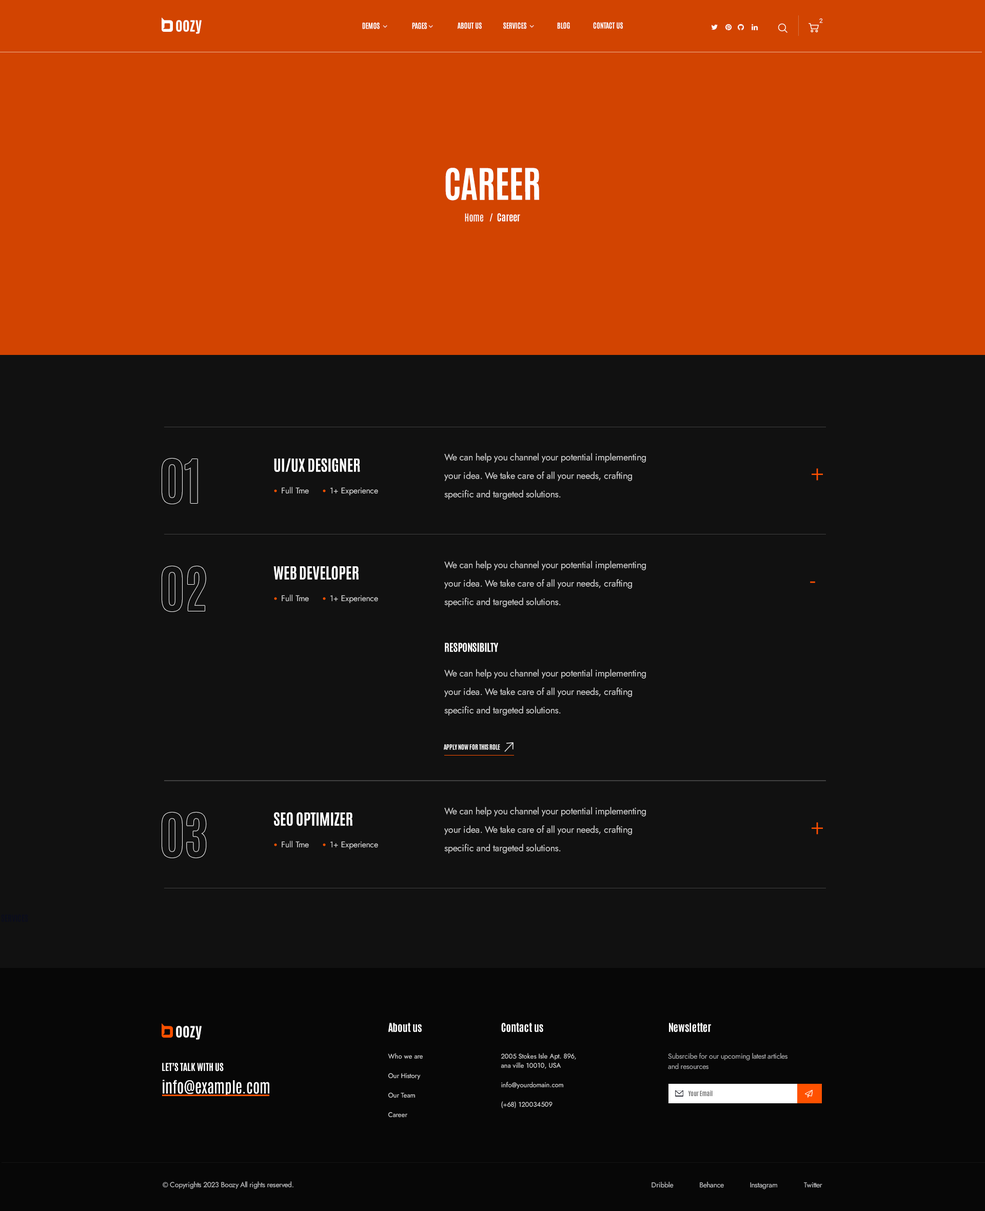
<style>
.page{position:relative;width:985px;height:1211px;background:#111111}
.page>*{position:absolute;margin:0}
.t1{font:15.4px "Antonio-Bold";color:#ffffff}
.t2{font:6.2px "Roboto-Regular";color:#ffffff;text-transform:uppercase}
.t3{font:9.2px/21.5px "Antonio-Regular";letter-spacing:-0.01em;color:#ffffff}
.t4{font:36.9px/76.9px "Antonio-Bold";letter-spacing:-0.01em;color:#ffffff;text-transform:uppercase}
.t5{font:9.2px/21.5px "Antonio-Bold";letter-spacing:-0.01em;color:#ffffff}
.t6{font:15.4px "Antonio-Bold";letter-spacing:-0.01em;color:#ffffff;text-transform:uppercase}
.t7{font:9.2px/18.5px "Jost-Regular";letter-spacing:-0.01em;color:#d0d0d0}
.t8{font:24.6px "Jost-Light";letter-spacing:-0.01em;color:#ff5100;text-transform:uppercase}
.t9{font:8.2px "Jost-Regular";letter-spacing:-0.01em;color:#d0d0d0}
.t10{font:10.3px/24.6px "Antonio-Bold";letter-spacing:-0.01em;color:#ffffff;text-transform:uppercase}
.t11{font:9.2px/24.6px "Jost-Regular";letter-spacing:-0.01em;color:#d0d0d0}
.t12{font:6.2px "Antonio-Bold";color:#ffffff;text-transform:uppercase}
.t13{font:10.3px "Antonio-Bold";color:#ffffff}
.t14{font:6.7px/19.5px "Jost-Regular";color:#dedede}
.t15{font:6.7px/9.2px "Jost-Regular";color:#dedede}
.t16{font:7.2px/10.3px "Jost-Regular";letter-spacing:-0.025em;color:#aaabad}
.t17{font:9.2px "Antonio-Bold";color:#ffffff;text-transform:uppercase}
.t18{font:15.4px "Antonio-Regular";color:#ffffff}
.t19{font:6.2px "Antonio-Bold";letter-spacing:-0.01em;color:#707070}
.t20{font:7.2px "Jost-Regular";letter-spacing:-0.025em;color:#c4c5c7}
</style>
<div class="page">
<p class="t1" style="left:176px;top:20px;width:26px;height:14px">oozy</p>
<p class="t2" style="left:819px;top:18px;width:4px;height:5px">2</p>
<p class="t3" style="left:445px;top:168px;width:94px;height:54px;text-align:center"><span class="t4">Career<br></span>Home   /<span class="t5">   Career</span></p>
<p class="t6" style="left:274px;top:458px;width:86px;height:14px">ui/ux designer</p>
<p class="t7" style="left:444px;top:453px;width:202px;height:47px">We can help you channel your potential implementing your idea. We take care of all your needs, crafting specific and targeted solutions.</p>
<p class="t8" style="left:811px;top:468px;width:12px;height:13px">+</p>
<p class="t9" style="left:282px;top:487px;width:27px;height:7px">Full Tme</p>
<p class="t9" style="left:330px;top:487px;width:48px;height:8px">1+ Experience</p>
<p class="t6" style="left:273px;top:566px;width:86px;height:14px">Web Developer</p>
<p class="t7" style="left:444px;top:561px;width:202px;height:46px">We can help you channel your potential implementing your idea. We take care of all your needs, crafting specific and targeted solutions.</p>
<p class="t8" style="left:810px;top:581px;width:5px;height:2px">-</p>
<p class="t9" style="left:282px;top:594px;width:27px;height:8px">Full Tme</p>
<p class="t9" style="left:330px;top:595px;width:48px;height:8px">1+ Experience</p>
<p class="t7" style="left:444px;top:643px;width:202px;height:72px"><span class="t10">responsibilty<br></span><span class="t11">We can help you channel your potential implementing </span>your idea. We take care of all your needs, crafting specific and targeted solutions.</p>
<p class="t12" style="left:444px;top:744px;width:56px;height:6px">Apply now for this role</p>
<p class="t7" style="left:444px;top:807px;width:202px;height:46px">We can help you channel your potential implementing your idea. We take care of all your needs, crafting specific and targeted solutions.</p>
<p class="t6" style="left:274px;top:812px;width:78px;height:14px">Seo optimizer</p>
<p class="t8" style="left:811px;top:822px;width:12px;height:12px">+</p>
<p class="t9" style="left:282px;top:841px;width:27px;height:7px">Full Tme</p>
<p class="t9" style="left:330px;top:841px;width:48px;height:8px">1+ Experience</p>
<p class="t1" style="left:176px;top:1026px;width:26px;height:14px">oozy</p>
<p class="t13" style="left:388px;top:1023px;width:34px;height:9px">About us</p>
<p class="t13" style="left:501px;top:1023px;width:42px;height:9px">Contact us</p>
<p class="t13" style="left:669px;top:1023px;width:42px;height:9px">Newsletter</p>
<p class="t14" style="left:388px;top:1053px;width:35px;height:64px">Who we are<br>Our History<br>Our Team<br>Career</p>
<p class="t14" style="left:501px;top:1053px;width:75px;height:55px">2005 Stokes Isle Apt. 896,<br><span class="t15">ana ville 10010, USA<br></span>info@yourdomain.com<br>(+68) 120034509</p>
<p class="t16" style="left:668px;top:1053px;width:119px;height:16px">Subsrcibe for our upcoming latest articles <br>and resources</p>
<p class="t17" style="left:162px;top:1063px;width:62px;height:8px">Let’s Talk with Us</p>
<p class="t18" style="left:163px;top:1080px;width:106px;height:16px">info@example.com</p>
<p class="t19" style="left:688px;top:1090px;width:24px;height:6px">Your Email</p>
<p class="t20" style="left:163px;top:1181px;width:130px;height:8px">© Copyrights 2023 Boozy All rights reserved.</p>
<p class="t20" style="left:651px;top:1182px;width:171px;height:7px">Dribble              Behance              Instagram              Twitter</p>
</div>
